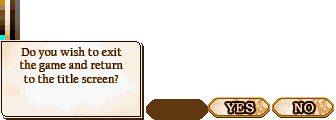
<style>
.page{position:relative;width:336px;height:120px;background:#ffffff}
.page>*{position:absolute;margin:0}
.t1{font:12px/14px "CalifornianFB-Reg";letter-spacing:0.025em;color:#180808}
.t2{font:12px/13px "CalifornianFB-Reg";letter-spacing:0.025em;color:#180808}
</style>
<div class="page">
<p class="t1" style="left:20px;top:47px;width:103px;height:36px;text-align:center">Do you wish to exit<br><span class="t2">the game and return<br></span>to the title screen?</p>
</div>
